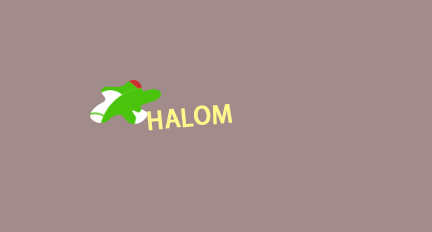
<style>
.page{position:relative;width:432px;height:232px;background:#a28b8b}
.page>*{position:absolute;margin:0}
.t1{font:24px "AdobeHeitiStd-Regular";color:#fff78c;text-transform:uppercase;font-weight:bold}
</style>
<div class="page">
<p class="t1" style="left:147px;top:104px;width:86px;height:27px;rotate:-6deg">Halom</p>
</div>
